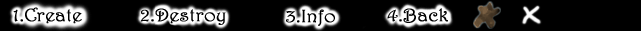
<style>
.page{position:relative;width:641px;height:31px;background:#000000}
.page>*{position:absolute;margin:0}
.t1{font:18px "Harrington";color:#000000;font-weight:bold;scale:1.08 1}
</style>
<div class="page">
<p class="t1" style="left:13px;top:7px;width:69px;height:17px">1.Create</p>
<p class="t1" style="left:140px;top:8px;width:86px;height:17px">2.Destroy</p>
<p class="t1" style="left:286px;top:9px;width:49px;height:17px">3.Info</p>
<p class="t1" style="left:387px;top:8px;width:61px;height:15px">4.Back</p>
</div>
